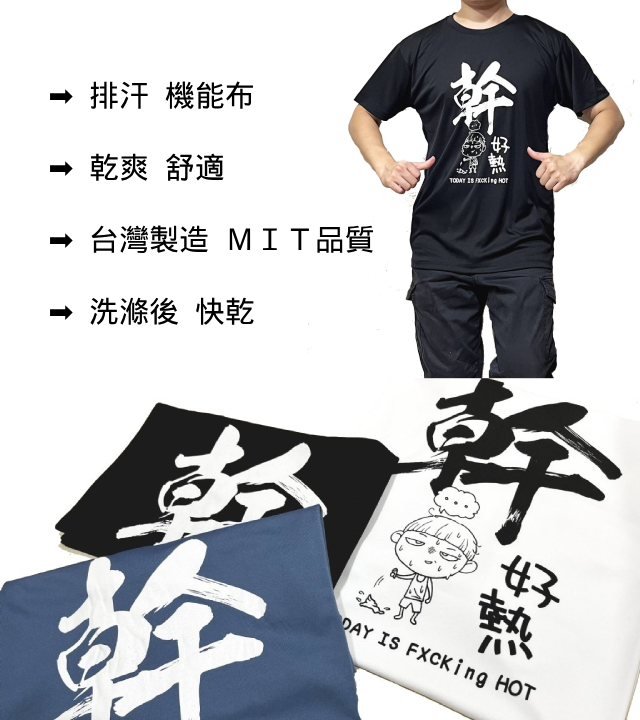
<style>
.page{position:relative;width:640px;height:720px;background:#ffffff}
.page>*{position:absolute;margin:0}
.t1{font:30px "DroidSansFallback";color:#000000}
.t2{font:30px "DejaVuSans";color:#000000}
</style>
<div class="page">
<p class="t1" style="left:50px;top:81px;width:324px;height:244px"><span class="t2">➡️</span>  排汗  機能布<br><br><span class="t2">➡️</span>  乾爽  舒適<br><br><span class="t2">➡️</span>  台灣製造  ＭＩＴ品質<br><br><span class="t2">➡️</span>  洗滌後  快乾</p>
</div>
